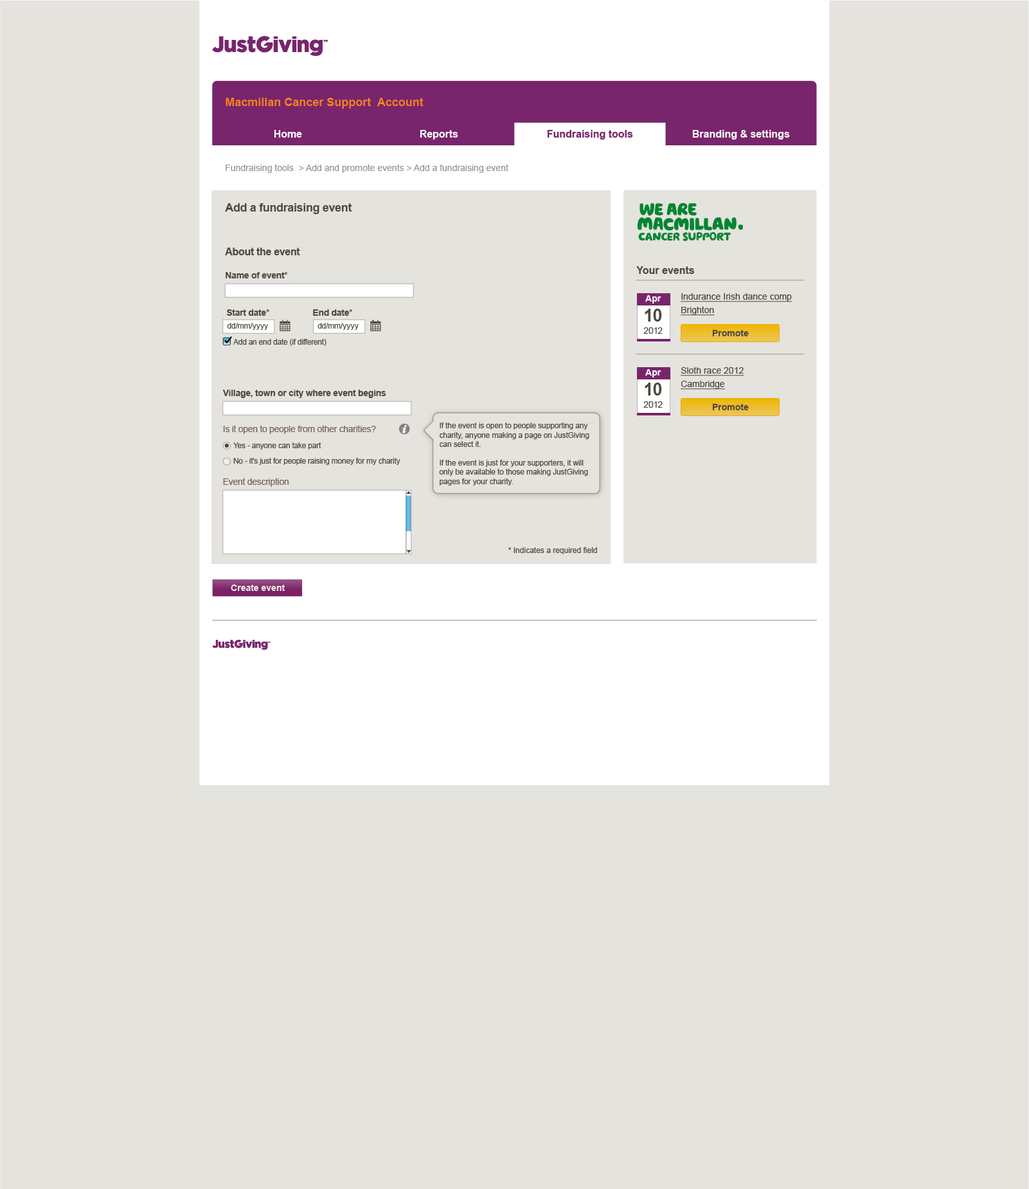
<style>
.page{position:relative;width:1029px;height:1189px;background:#e5e3dd}
.page>*{position:absolute;margin:0}
.t1{font:11.6px "Arial-BoldMT";color:#f48120}
.t2{font:10.3px "Arial-BoldMT";color:#ffffff}
.t3{font:10.3px "Arial-BoldMT";color:#78256d}
.t4{font:9px "ArialMT";color:#9d938d}
.t5{font:11.6px "Arial-BoldMT";letter-spacing:-0.02em;color:#4d4840}
.t6{font:10.3px "Arial-BoldMT";letter-spacing:-0.02em;color:#4d4840}
.t7{font:10.3px "Arial-BoldMT";color:#4d4840}
.t8{font:9px "Arial-BoldMT";letter-spacing:-0.02em;color:#4d4840}
.t9{font:9px/13.5px "ArialMT";color:#4d4840;text-decoration:underline}
.t10{font:9px "Arial-BoldMT";color:#ffffff}
.t11{font:17.4px "Arial-BoldMT";color:#4d4840}
.t12{font:7.7px "ArialMT";letter-spacing:-0.01em;color:#4d4840}
.t13{font:9px "ArialMT";color:#4d4840}
.t14{font:7.7px "ArialMT";letter-spacing:-0.02em;color:#4d4840}
.t15{font:9px "ArialMT";letter-spacing:-0.02em;color:#73655d}
.t16{font:7.7px "ArialMT";color:#4d4840}
.t17{font:9px "Arial-BoldMT";color:#eeeee9}
</style>
<div class="page">
<p class="t1" style="left:226px;top:98px;width:198px;height:11px">Macmillan Cancer Support  Account</p>
<p class="t2" style="left:274px;top:130px;width:28px;height:8px">Home</p>
<p class="t2" style="left:420px;top:130px;width:38px;height:10px">Reports</p>
<p class="t3" style="left:547px;top:130px;width:86px;height:10px">Fundraising tools</p>
<p class="t2" style="left:692px;top:130px;width:98px;height:10px">Branding &amp; settings</p>
<p class="t4" style="left:226px;top:164px;width:283px;height:9px">Fundraising tools  &gt; Add and promote events &gt; Add a fundraising event</p>
<p class="t5" style="left:225px;top:203px;width:127px;height:11px">Add a fundraising event</p>
<p class="t6" style="left:225px;top:248px;width:75px;height:7px">About the event</p>
<p class="t7" style="left:636px;top:266px;width:58px;height:8px">Your events</p>
<p class="t8" style="left:226px;top:272px;width:62px;height:6px">Name of event*</p>
<p class="t9" style="left:681px;top:293px;width:111px;height:23px">Indurance Irish dance comp Brighton</p>
<p class="t10" style="left:645px;top:295px;width:17px;height:8px">Apr</p>
<p class="t8" style="left:227px;top:309px;width:42px;height:7px">Start date*</p>
<p class="t8" style="left:313px;top:309px;width:40px;height:7px">End date*</p>
<p class="t11" style="left:645px;top:309px;width:17px;height:12px">10</p>
<p class="t12" style="left:227px;top:323px;width:41px;height:7px">dd/mm/yyyy</p>
<p class="t12" style="left:318px;top:323px;width:41px;height:7px">dd/mm/yyyy</p>
<p class="t13" style="left:644px;top:327px;width:19px;height:7px">2012</p>
<p class="t14" style="left:233px;top:339px;width:94px;height:7px">Add an end date (if different)</p>
<p class="t10" style="left:645px;top:369px;width:17px;height:8px">Apr</p>
<p class="t9" style="left:681px;top:366px;width:63px;height:24px">Sloth race 2012<br>Cambridge</p>
<p class="t8" style="left:222px;top:390px;width:164px;height:8px">Village, town or city where event begins</p>
<p class="t11" style="left:645px;top:382px;width:17px;height:13px">10</p>
<p class="t13" style="left:644px;top:401px;width:19px;height:7px">2012</p>
<p class="t15" style="left:223px;top:425px;width:153px;height:9px">Is it open to people from other charities?</p>
<p class="t12" style="left:439px;top:422px;width:151px;height:63px">If the event is open to people supporting any charity, anyone making a page on JustGiving can select it. <br><br>If the event is just for your supporters, it will only be available to those making JustGiving pages for your charity.</p>
<p class="t14" style="left:233px;top:442px;width:88px;height:7px">Yes - anyone can take part</p>
<p class="t14" style="left:233px;top:458px;width:168px;height:7px">No - it's just for people raising money for my charity</p>
<p class="t15" style="left:223px;top:478px;width:66px;height:9px">Event description</p>
<p class="t16" style="left:509px;top:547px;width:88px;height:7px">* Indicates a required field</p>
<p class="t17" style="left:231px;top:584px;width:54px;height:7px">Create event</p>
</div>
